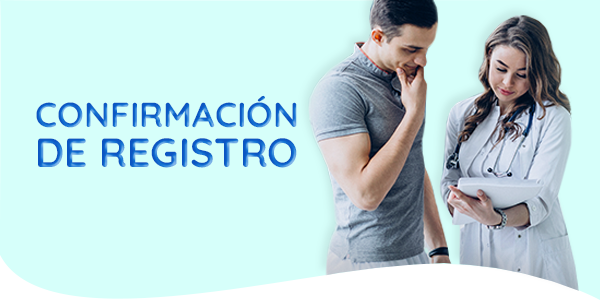
<style>
.page{position:relative;width:600px;height:300px;background:#d6fffa}
.page>*{position:absolute;margin:0}
.t1{font:34.6px "Quicksand-Bold"}
.t2{font:40.6px "Quicksand-Bold"}
</style>
<div class="page">
<p class="t1" style="left:36px;top:95px;width:261px;height:33px">CONFIRMACIÓN</p>
<p class="t2" style="left:38px;top:138px;width:259px;height:30px">DE REGISTRO</p>
</div>
